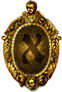
<style>
.page{position:relative;width:62px;height:92px;background:#ffffff}
.page>*{position:absolute;margin:0}
.t1{font:55.7px "BlackwoodCastle"}
</style>
<div class="page">
<p class="t1" style="left:21px;top:33px;width:24px;height:32px;rotate:-2deg">x</p>
</div>
